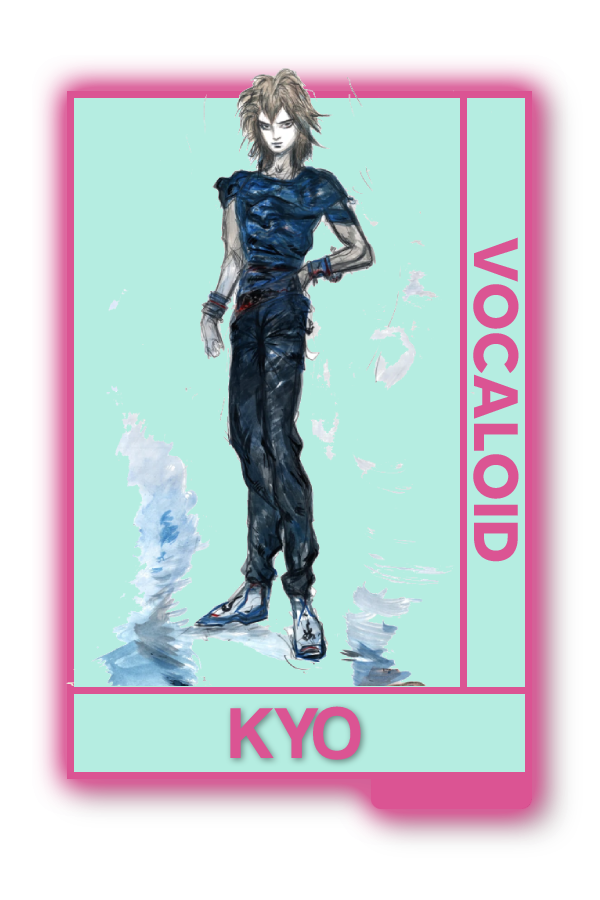
<style>
.page{position:relative;width:600px;height:900px;background:#b5ede1}
.page>*{position:absolute;margin:0}
.t1{font:62.5px "MADETOMMY-Bold";color:#db5493}
.t2{font:75px "CoolveticaRg-Regular";color:#db5493}
</style>
<div class="page">
<p class="t1" style="left:473px;top:237px;width:46px;height:325px;rotate:90deg">VOCALOID</p>
<p class="t2" style="left:230px;top:706px;width:131px;height:54px">KYO</p>
</div>
